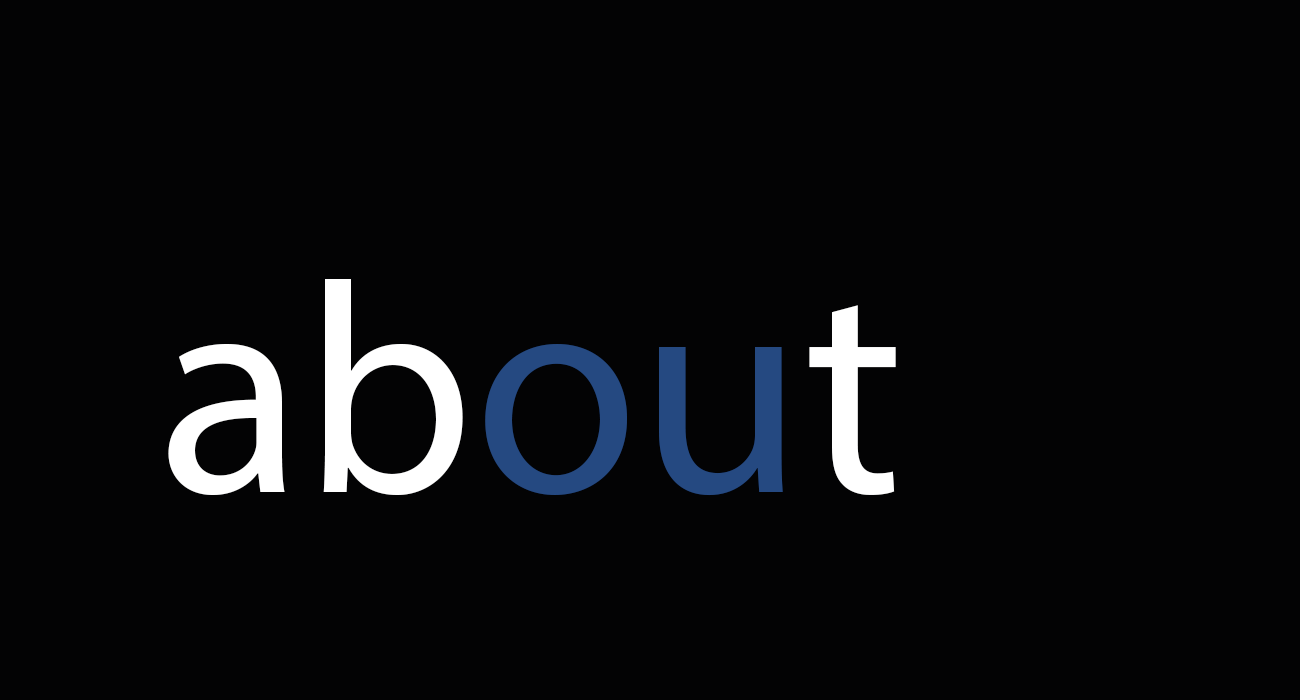
<style>
.page{position:relative;width:1300px;height:700px;background:#030304}
.page>*{position:absolute;margin:0}
.t1{font:300px "MyriadPro-Regular";color:#ffffff}
.t2{font:300px "MyriadPro-Regular";color:#254981}
</style>
<div class="page">
<p class="t1" style="left:168px;top:279px;width:728px;height:217px">ab<span class="t2">ou</span>t</p>
</div>
